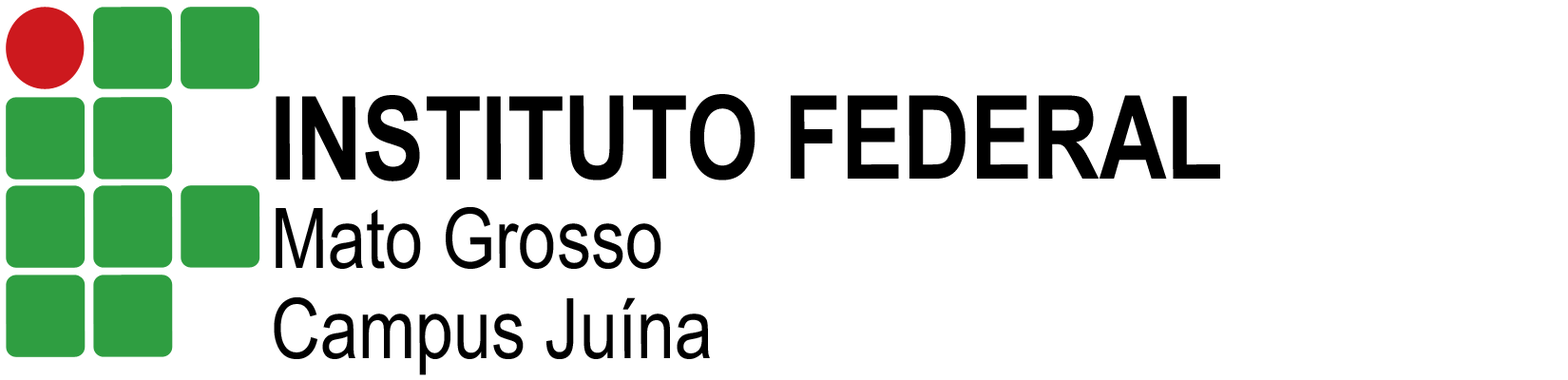
<style>
.page{position:relative;width:1568px;height:380px;background:#ffffff}
.page>*{position:absolute;margin:0}
.t1{font:115.9px "ArialNarrow-Bold";color:#000000}
.t2{font:83.6px "ArialNarrow";color:#000000}
</style>
<div class="page">
<p class="t1" style="left:276px;top:94px;width:944px;height:88px">INSTITUTO FEDERAL</p>
<p class="t2" style="left:276px;top:207px;width:385px;height:62px">Mato Grosso</p>
<p class="t2" style="left:274px;top:297px;width:436px;height:78px">Campus Juína</p>
</div>
